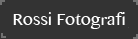
<style>
.page{position:relative;width:138px;height:39px;background:#333333}
.page>*{position:absolute;margin:0}
.t1{font:16px "OriyaMN";color:#ffffff}
</style>
<div class="page">
<p class="t1" style="left:13px;top:12px;width:112px;height:17px">Rossi Fotografi</p>
</div>
